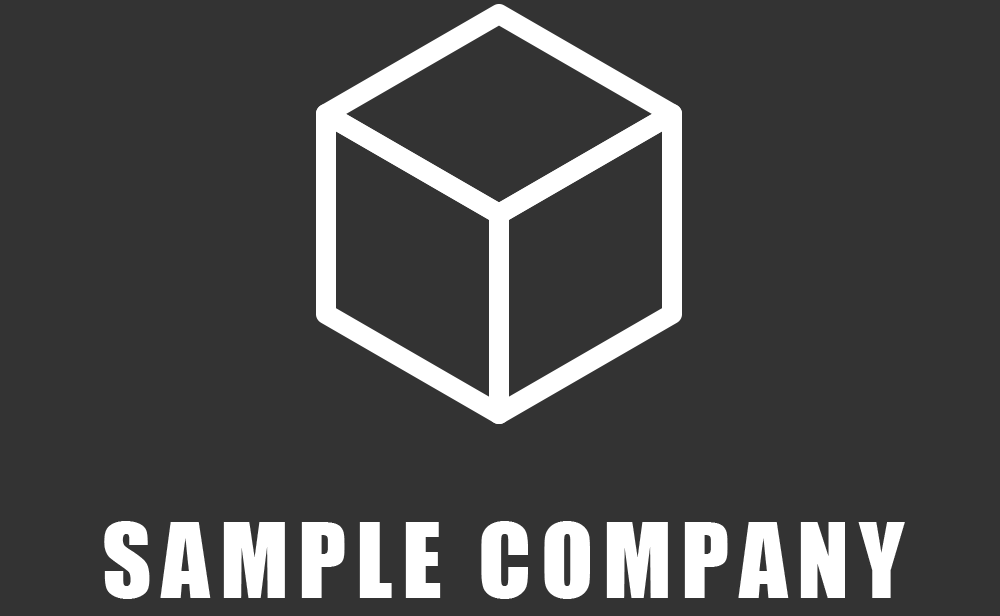
<style>
.page{position:relative;width:1000px;height:616px;background:#333333}
.page>*{position:absolute;margin:0}
.t1{font:96px "Impact";letter-spacing:0.1em;color:#ffffff}
</style>
<div class="page">
<p class="t1" style="left:104px;top:521px;width:801px;height:78px">SAMPLE COMPANY</p>
</div>
